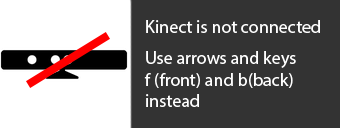
<style>
.page{position:relative;width:340px;height:128px;background:#333333}
.page>*{position:absolute;margin:0}
.t1{font:18px "MyriadPro-Regular";color:#fefefe}
.t2{font:18px "MyriadPro-Regular";color:#ffffff}
</style>
<div class="page">
<p class="t1" style="left:146px;top:20px;width:174px;height:13px">Kinect is not connected</p>
<p class="t2" style="left:144px;top:51px;width:152px;height:56px">Use arrows and keys<br>f (front) and b(back)<br>instead</p>
</div>
